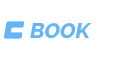
<style>
.page{position:relative;width:133px;height:60px;background:#ffffff}
.page>*{position:absolute;margin:0}
.t1{font:21.2px "Raleway-ExtraBold";color:#64b5f6;text-transform:uppercase}
.t2{font:21.2px "Raleway-ExtraBold";color:#ffffff;text-transform:uppercase}
</style>
<div class="page">
<p class="t1" style="left:30px;top:23px;width:99px;height:15px">Book<span class="t2">SYS</span></p>
</div>
